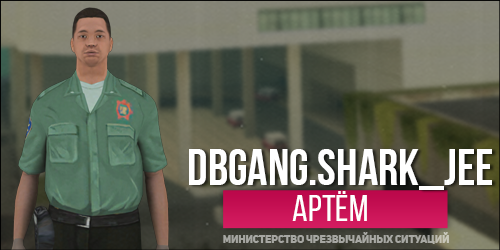
<style>
.page{position:relative;width:500px;height:250px}
.page>*{position:absolute;margin:0}
.t1{font:50px "BebasNeueBold";color:#ffffff}
.t2{font:36.8px "BebasNeueRegular";color:#ffffff}
.t3{font:10.6px "UniSansHeavyCaps";color:#a6a6a2}
</style>
<div class="page">
<p class="t1" style="left:189px;top:149px;width:303px;height:41px">DBGANG.SHARK_JEE</p>
<p class="t2" style="left:292px;top:191px;width:75px;height:30px">артём</p>
<p class="t3" style="left:223px;top:232px;width:226px;height:12px">МИНИСТЕРСТВО ЧРЕЗВЫЧАЙНЫХ СИТУАЦИЙ</p>
</div>
